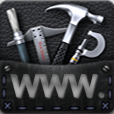
<style>
.page{position:relative;width:114px;height:114px}
.page>*{position:absolute;margin:0}
.t1{font:30px "CharcoalCY"}
.t2{font:30px "AdobeHeitiStd-Regular"}
</style>
<div class="page">
<p class="t1" style="left:10px;top:74px;width:93px;height:23px">WWW<span class="t2">.</span></p>
</div>
